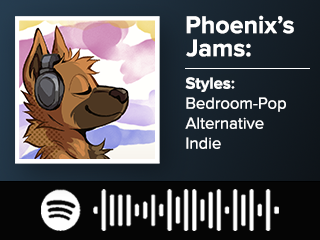
<style>
.page{position:relative;width:320px;height:240px}
.page>*{position:absolute;margin:0}
.t1{font:25px "ProximaNova-Bold";color:#ffffff}
.t2{font:16.7px "ProximaNova-Regular";color:#ffffff}
.t3{font:16.7px "ProximaNova-Bold";color:#ffffff}
</style>
<div class="page">
<p class="t1" style="left:186px;top:15px;width:108px;height:19px">Phoenix’s</p>
<p class="t1" style="left:186px;top:39px;width:65px;height:18px">Jams:</p>
<p class="t2" style="left:185px;top:77px;width:101px;height:72px"><span class="t3">Styles:<br></span>Bedroom-Pop<br>Alternative<br>Indie</p>
</div>
